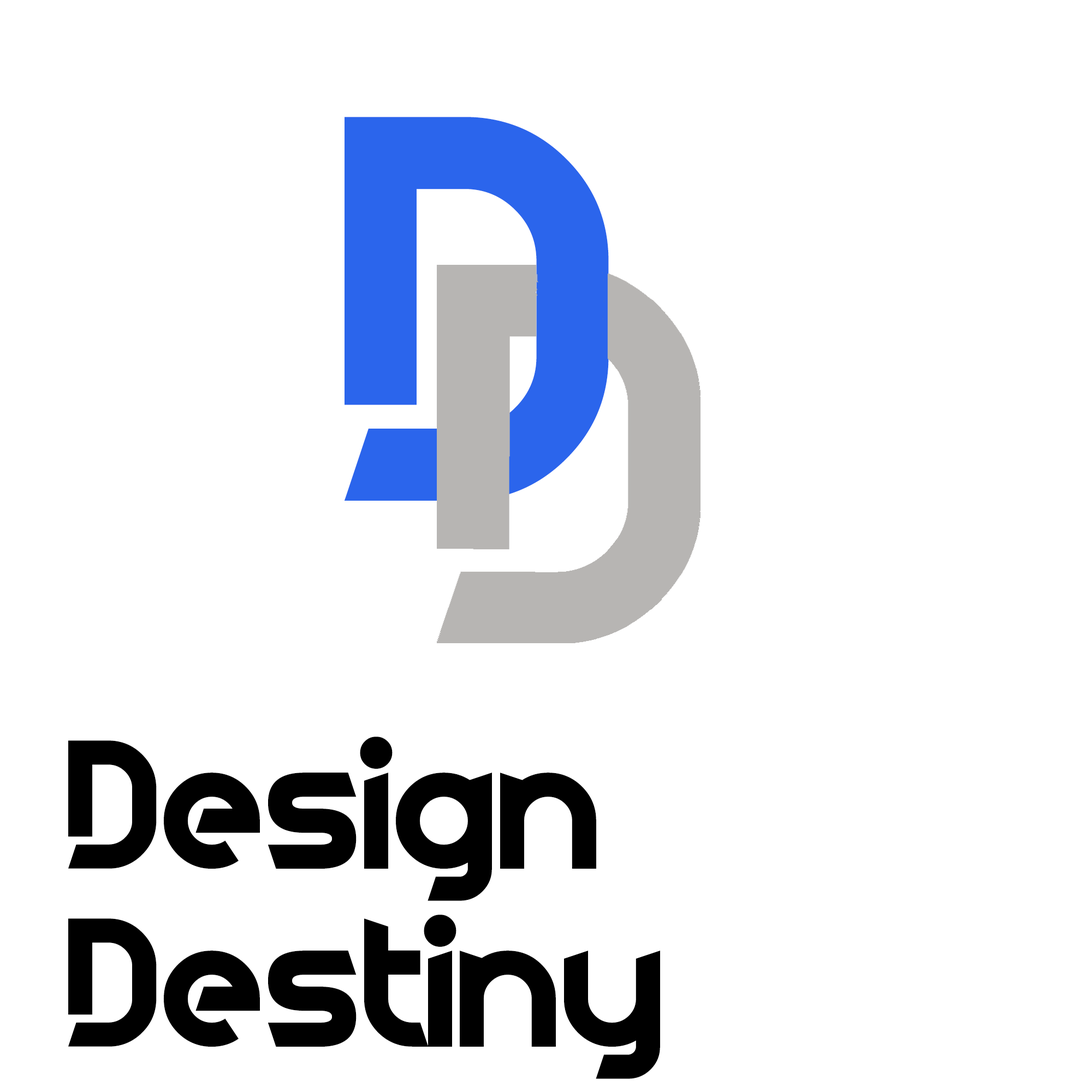
<style>
.page{position:relative;width:1092px;height:1092px;background:#ffffff}
.page>*{position:absolute;margin:0}
.t1{font:491.2px "FluidLighter";color:#2b65ec}
.t2{font:491.2px "FluidLighter";color:#000000}
.t3{font:163.8px "FluidLighter";color:#000000}
</style>
<div class="page">
<p class="t1" style="left:344px;top:117px;width:265px;height:384px"><span class="t2"><br></span>D</p>
<p class="t3" style="left:68px;top:737px;width:528px;height:164px">Design</p>
<p class="t3" style="left:68px;top:915px;width:592px;height:164px">Destiny</p>
</div>
